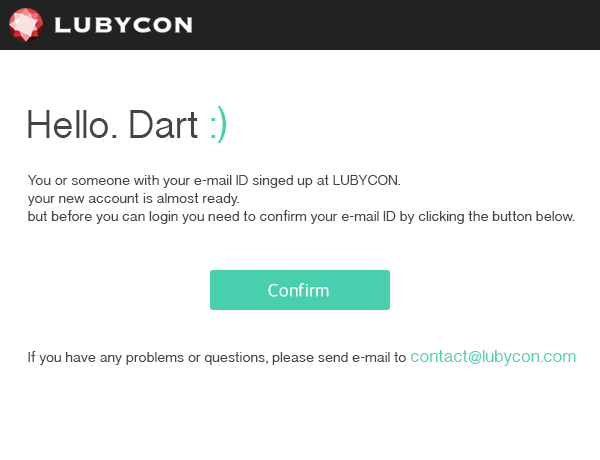
<style>
.page{position:relative;width:600px;height:460px;background:#ffffff}
.page>*{position:absolute;margin:0}
.t1{font:40px "TamilSangamMN";color:#444444}
.t2{font:40px "TamilSangamMN";color:#48cfad}
.t3{font:15px "TamilSangamMN";color:#444444}
.t4{font:18px "AppleSDGothicNeo-Light";letter-spacing:0.025em;color:#ffffff}
.t5{font:18px "TamilSangamMN";color:#48cfad}
</style>
<div class="page">
<p class="t1" style="left:28px;top:106px;width:199px;height:37px">Hello. Dart <span class="t2">:)</span></p>
<p class="t3" style="left:27px;top:175px;width:548px;height:49px">You or someone with your e-mail ID singed up at LUBYCON.<br>your new account is almost ready.<br>but before you can login you need to confirm your e-mail ID by clicking the button below.</p>
<p class="t4" style="left:268px;top:283px;width:61px;height:14px">Confirm</p>
<p class="t3" style="left:28px;top:350px;width:548px;height:16px">If you have any problems or questions, please send e-mail to <span class="t5">contact@lubycon.com</span></p>
</div>
